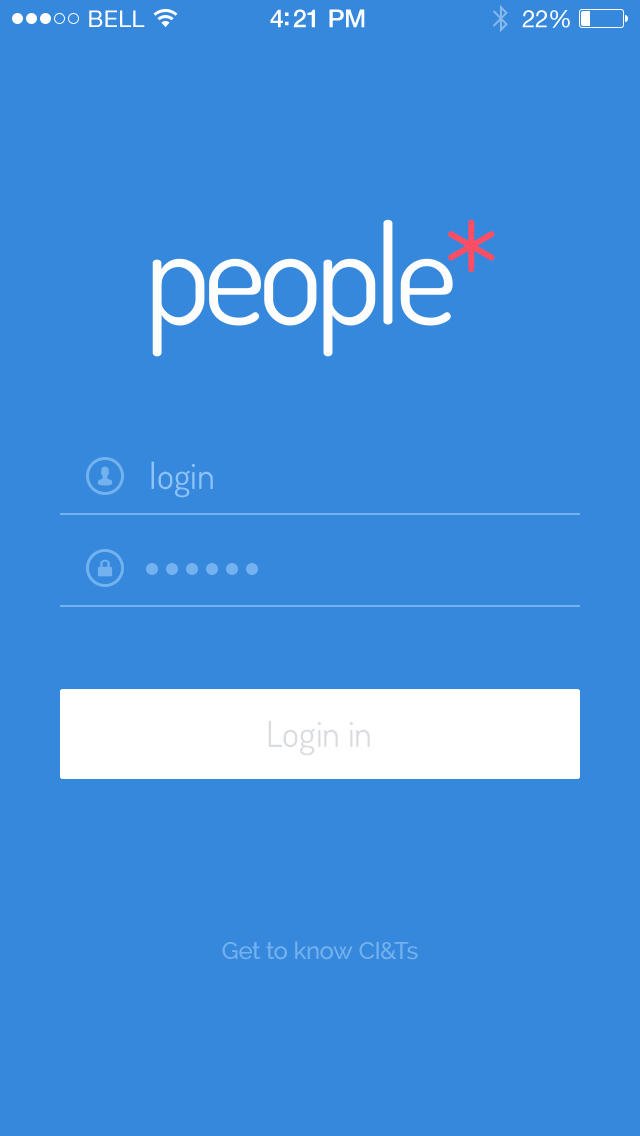
<style>
.page{position:relative;width:640px;height:1136px;background:#3588dc}
.page>*{position:absolute;margin:0}
.t1{font:36px "Dosis-Book";color:#8dc3f9}
.t2{font:36px "Dosis-Book";color:#d9dcdf}
.t3{font:24px "Raleway-Medium";letter-spacing:-0.01em;color:#73b1ef}
</style>
<div class="page">
<p class="t1" style="left:151px;top:461px;width:62px;height:37px">login</p>
<p class="t2" style="left:268px;top:720px;width:102px;height:36px">Login in</p>
<p class="t2" style="left:268px;top:720px;width:102px;height:36px">Login in</p>
<p class="t3" style="left:222px;top:941px;width:196px;height:19px">Get to know CI&amp;Ts</p>
</div>
